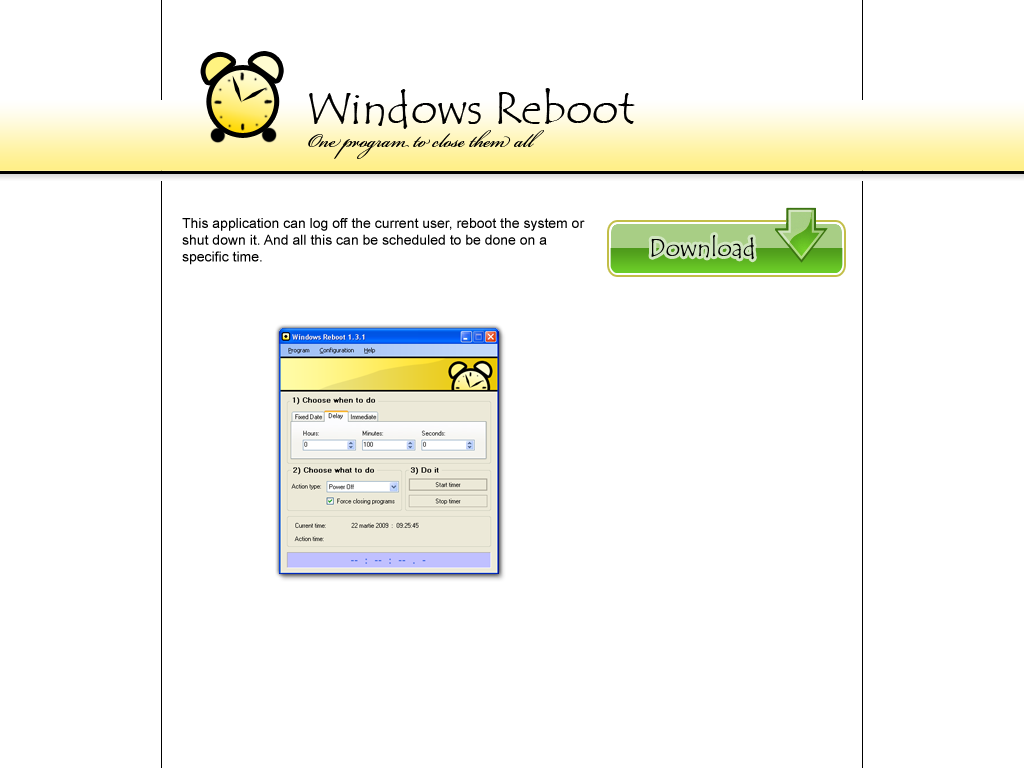
<style>
.page{position:relative;width:1024px;height:768px;background:#ffffff}
.page>*{position:absolute;margin:0}
.t1{font:45px "TempusSansITC";color:#000000}
.t2{font:30px "BickhamScriptPro-Regular";color:#000000}
.t3{font:14px "ArialMT";color:#000000}
.t4{font:25px "TempusSansITC";color:#010101}
</style>
<div class="page">
<p class="t1" style="left:309px;top:88px;width:326px;height:41px">Windows Reboot</p>
<p class="t2" style="left:308px;top:130px;width:236px;height:29px">One program to close them all</p>
<p class="t3" style="left:182px;top:218px;width:403px;height:47px">This application can log off the current user, reboot the system or<br>shut down it. And all this can be scheduled to be done on a<br>specific time.</p>
<p class="t4" style="left:651px;top:235px;width:103px;height:25px">Download</p>
</div>
